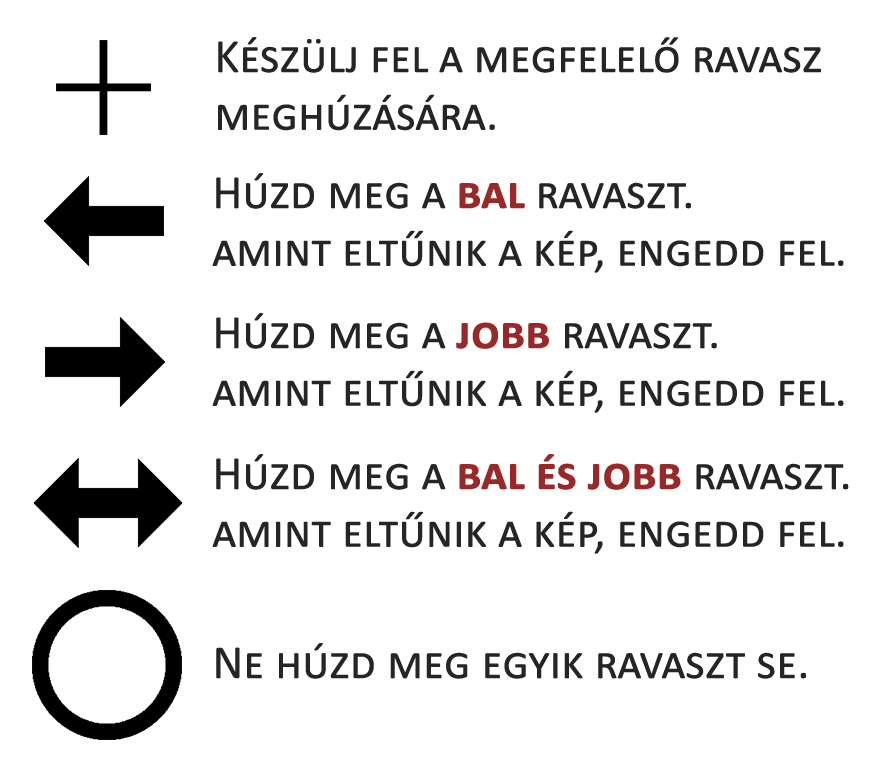
<style>
.page{position:relative;width:887px;height:774px;background:#ffffff}
.page>*{position:absolute;margin:0}
.t1{font:48px "Calibri";color:#252525;font-variant:small-caps}
.t2{font:48px "Calibri-Bold";color:#992828;font-variant:small-caps}
</style>
<div class="page">
<p class="t1" style="left:218px;top:37px;width:603px;height:94px">Készülj fel a megfelelő ravasz<br>meghúzására.</p>
<p class="t1" style="left:212px;top:173px;width:632px;height:100px">Húzd meg a <span class="t2">bal </span>ravaszt.<br>amint eltűnik a kép, engedd fel.</p>
<p class="t1" style="left:212px;top:313px;width:632px;height:100px">Húzd meg a <span class="t2">jobb </span>ravaszt.<br>amint eltűnik a kép, engedd fel.</p>
<p class="t1" style="left:212px;top:454px;width:637px;height:100px">Húzd meg a <span class="t2">bal és jobb </span>ravaszt.<br>amint eltűnik a kép, engedd fel.</p>
<p class="t1" style="left:216px;top:643px;width:590px;height:36px">Ne húzd meg egyik ravaszt se.</p>
</div>
